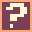
<style>
.page{position:relative;width:32px;height:32px;background:#7c3f58}
.page>*{position:absolute;margin:0}
.t1{font:36px "PixelDigivolve";letter-spacing:0.05em;color:#fff6d3}
</style>
<div class="page">
<p class="t1" style="left:6px;top:3px;width:21px;height:25px">?</p>
</div>
